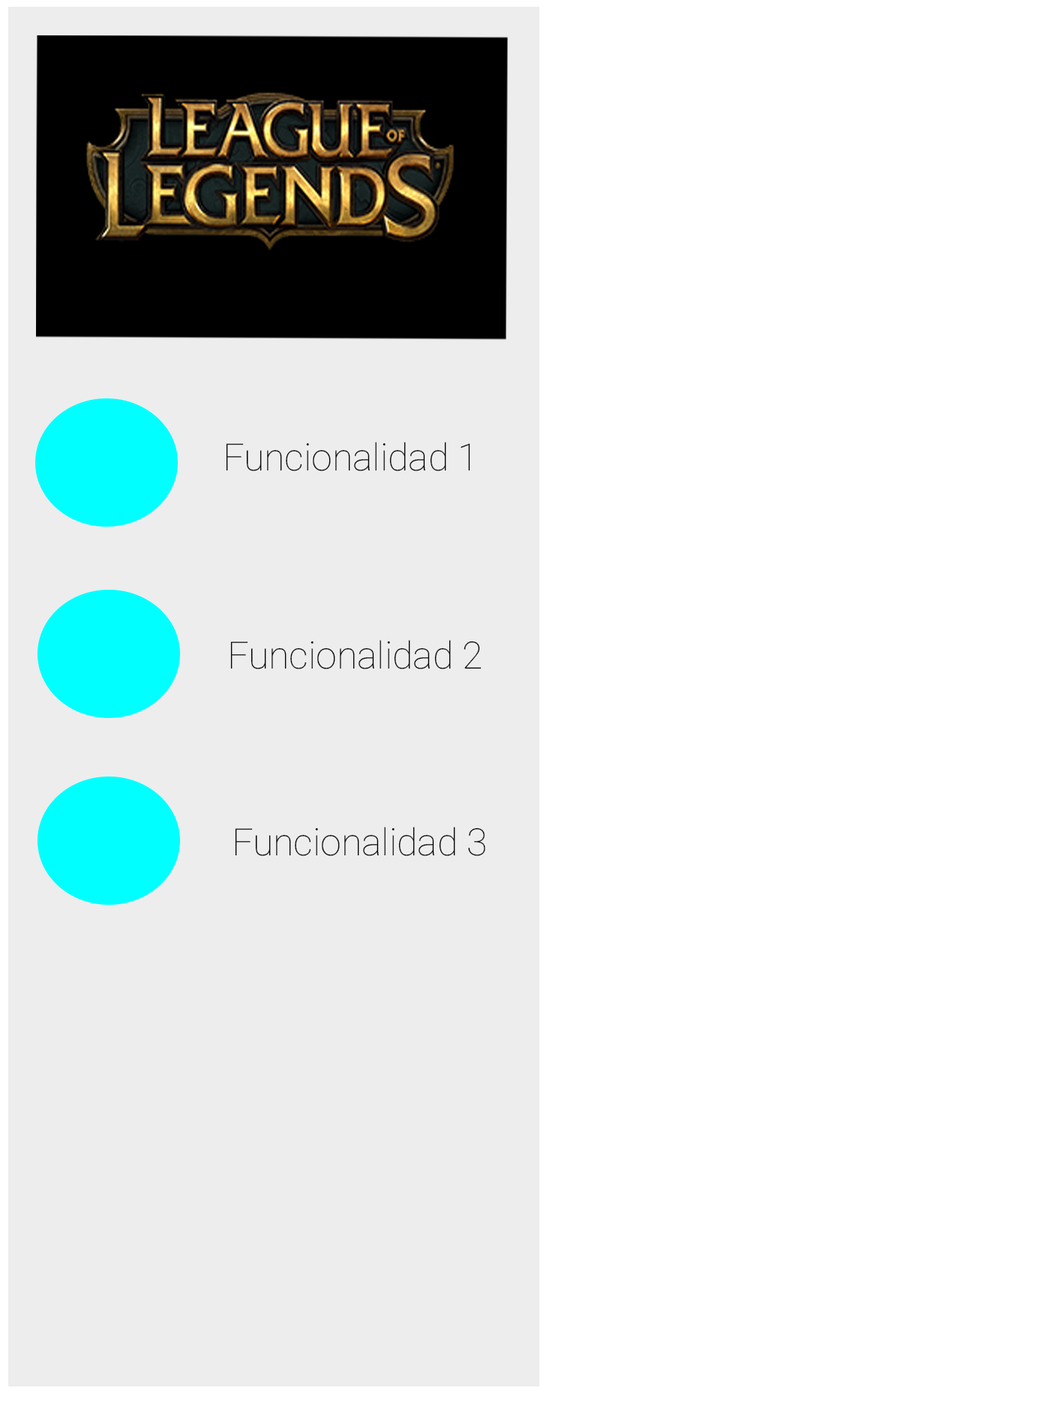
<style>
.page{position:relative;width:1063px;height:1418px;background:#ffffff}
.page>*{position:absolute;margin:0}
.t1{font:9px "Roboto-Thin";color:#000000}
</style>
<div class="page">
<p class="t1" style="left:226px;top:442px;width:244px;height:29px">Funcionalidad 1</p>
<p class="t1" style="left:230px;top:640px;width:252px;height:29px">Funcionalidad 2</p>
<p class="t1" style="left:235px;top:826px;width:250px;height:30px">Funcionalidad 3</p>
</div>
